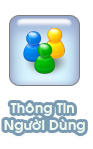
<style>
.page{position:relative;width:93px;height:149px}
.page>*{position:absolute;margin:0}
.t1{font:14px "VNI-Avo-Bold";color:#eef9ef}
</style>
<div class="page">
<p class="t1" style="left:4px;top:103px;width:81px;height:30px;text-align:center">Thoâng Tin <br>Ngöôøi Duøng</p>
</div>
